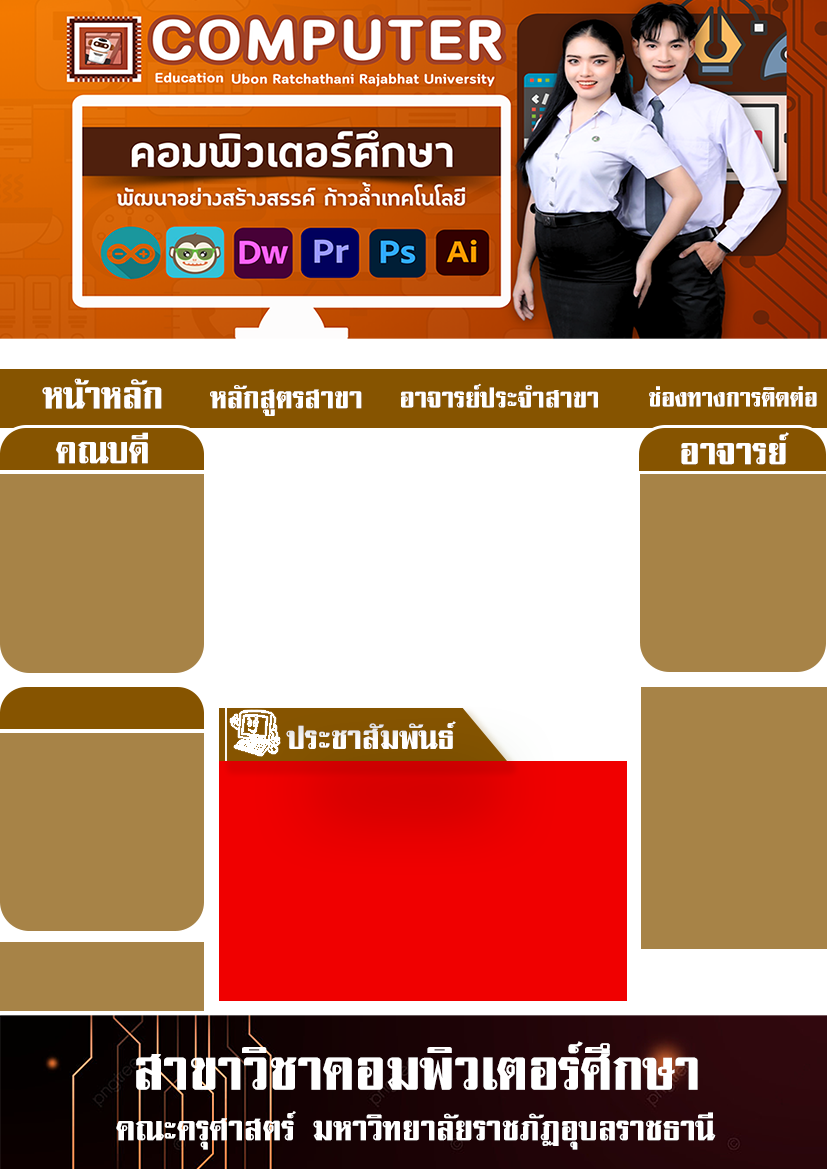
<style>
.page{position:relative;width:827px;height:1169px;background:#ffffff}
.page>*{position:absolute;margin:0}
.t1{font:55.4px "TS-PrachachonNP";color:#ffffff}
.t2{font:44.4px "TS-PrachachonNP";color:#ffffff}
.t3{font:41.4px "TS-PrachachonNP";color:#ffffff}
.t4{font:37.8px "TS-PrachachonNP";color:#ffffff}
.t5{font:48.1px "TS-PrachachonNP";color:#ffffff}
.t6{font:50.5px/50.5px "TS-PrachachonNP";color:#ffffff}
.t7{font:83.9px/50.5px "TS-PrachachonNP";color:#ffffff}
</style>
<div class="page">
<p class="t1" style="left:42px;top:378px;width:120px;height:31px">หน้าหลัก</p>
<p class="t2" style="left:210px;top:385px;width:152px;height:31px">หลักสูตรสาขา</p>
<p class="t3" style="left:401px;top:383px;width:197px;height:25px">อาจารย์ประจำสาขา</p>
<p class="t4" style="left:649px;top:386px;width:168px;height:21px">ช่องทางการติดต่อ</p>
<p class="t1" style="left:56px;top:432px;width:92px;height:32px">คณบดี</p>
<p class="t1" style="left:681px;top:432px;width:108px;height:33px">อาจารย์</p>
<p class="t5" style="left:286px;top:721px;width:170px;height:28px">ประชาสัมพันธ์</p>
<p class="t6" style="left:116px;top:1041px;width:600px;height:109px;text-align:center"><span class="t7">สาขาวิชาคอมพิวเตอร์ศึกษา<br></span>คณะครุศาสตร์ มหาวิทยาลัยราชภัฏอุบลราชธานี</p>
</div>
